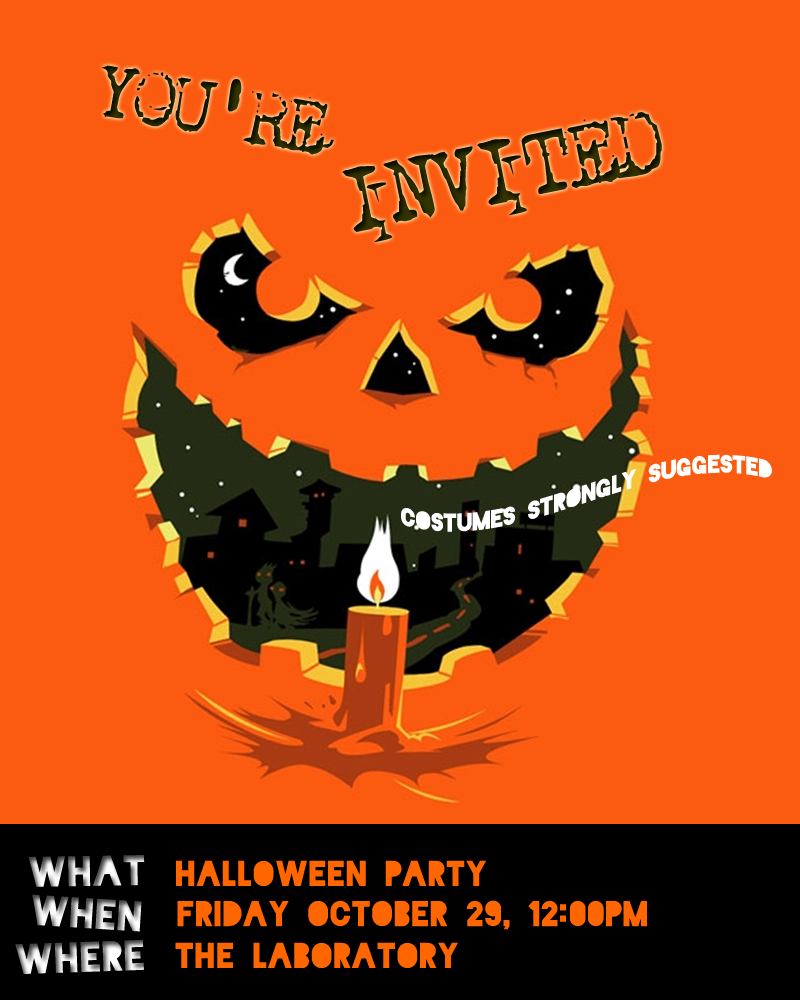
<style>
.page{position:relative;width:800px;height:1000px;background:#fb5b11}
.page>*{position:absolute;margin:0}
.t1{font:90px "1942report";letter-spacing:-0.25em;color:#1c1c00;font-weight:bold}
.t2{font:106.7px "1942report";letter-spacing:-0.25em;color:#333300;font-weight:bold}
.t3{font:24.1px/5.4px "Blackout-Midnight";color:#ffffff}
.t4{font:40px "Blackout-Midnight";font-weight:bold}
.t5{font:33.7px "Blackout-Midnight";color:#ff6600;font-weight:bold}
</style>
<div class="page">
<p class="t1" style="left:102px;top:65px;width:232px;height:90px;rotate:10deg">YOU'RE</p>
<p class="t2" style="left:342px;top:112px;width:320px;height:130px;rotate:-11deg">INVITED</p>
<p class="t3" style="left:401px;top:454px;width:371px;height:78px;text-align:center">costumes strongly suggested</p>
<p class="t4" style="left:28px;top:855px;width:117px;height:32px;rotate:-1deg">whAT</p>
<p class="t5" style="left:176px;top:860px;width:310px;height:26px">Halloween party</p>
<p class="t4" style="left:32px;top:894px;width:110px;height:38px;rotate:4deg">wheN</p>
<p class="t5" style="left:177px;top:900px;width:470px;height:30px">Friday october 29, 12:00Pm</p>
<p class="t4" style="left:15px;top:939px;width:129px;height:35px;rotate:-2deg">where</p>
<p class="t5" style="left:175px;top:942px;width:283px;height:26px">The laboratory</p>
</div>
